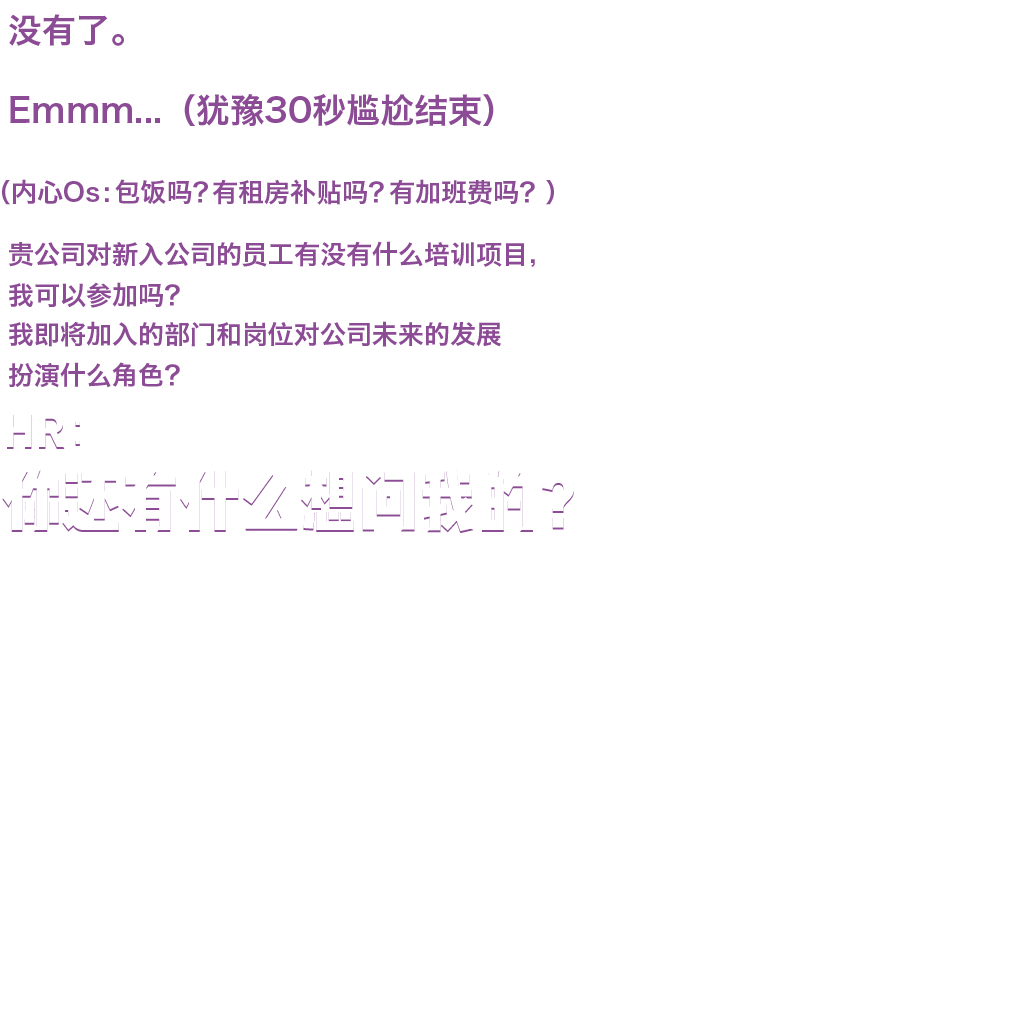
<style>
.page{position:relative;width:1024px;height:1024px;background:#ffffff}
.page>*{position:absolute;margin:0}
.t1{font:34px "HiraginoSansGB-W6";color:#8c4b95}
.t2{font:26px "HiraginoSansGB-W6";color:#8c4b95}
.t3{font:26px/41.6px "HiraginoSansGB-W6";color:#8c4b95}
</style>
<div class="page">
<p class="t1" style="left:9px;top:14px;width:115px;height:32px">没有了。</p>
<p class="t1" style="left:10px;top:94px;width:484px;height:32px">Emmm...（犹豫30秒尴尬结束）</p>
<p class="t2" style="left:2px;top:179px;width:552px;height:26px">（内心Os：包饭吗？有租房补贴吗？有加班费吗？）</p>
<p class="t3" style="left:8px;top:241px;width:527px;height:67px;text-align:justify">贵公司对新入公司的员工有没有什么培训项目，<br>我可以参加吗？</p>
<p class="t3" style="left:9px;top:321px;width:493px;height:67px;text-align:justify">我即将加入的部门和岗位对公司未来的发展<br>扮演什么角色？</p>
</div>
